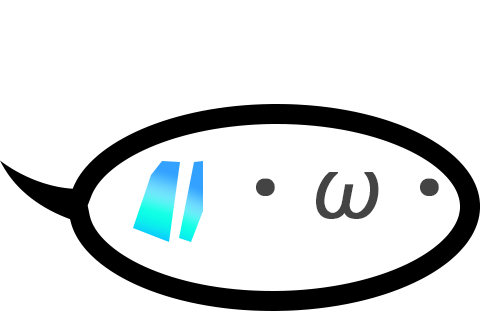
<style>
.page{position:relative;width:480px;height:320px;background:#ffffff}
.page>*{position:absolute;margin:0}
.t1{font:80px "KozGoPr6N-Regular";color:#444444;font-weight:bold}
</style>
<div class="page">
<p class="t1" style="left:256px;top:172px;width:183px;height:47px">・ω・</p>
</div>
